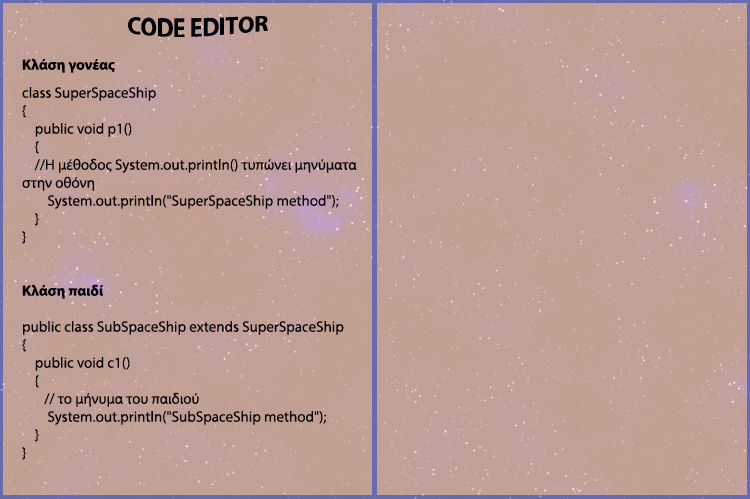
<style>
.page{position:relative;width:750px;height:499px;background:#c1a095}
.page>*{position:absolute;margin:0}
.t1{font:23.3px "MyriadPro-Bold";color:#000000}
.t2{font:15px "MyriadPro-Bold";color:#000000}
.t3{font:15px "MyriadPro-Regular";color:#000000}
</style>
<div class="page">
<p class="t1" style="left:128px;top:16px;width:140px;height:21px">CODE EDITOR</p>
<p class="t2" style="left:22px;top:58px;width:93px;height:15px">Κλάση γονέας</p>
<p class="t3" style="left:22px;top:87px;width:335px;height:373px">class SuperSpaceShip<br>{<br>    public void p1()<br>    {<br>    //Η μέθοδος System.out.println() τυπώνει μηνύματα στην οθόνη   <br>        System.out.println("SuperSpaceShip method"); <br>    }<br>}<br><br><br><span class="t2">Κλάση παιδί<br></span><br>public class SubSpaceShip extends SuperSpaceShip<br>{<br>    public void c1()<br>    {<br>       // το μήνυμα του παιδιού<br>        System.out.println("SubSpaceShip method"); <br>    }<br>}</p>
</div>
